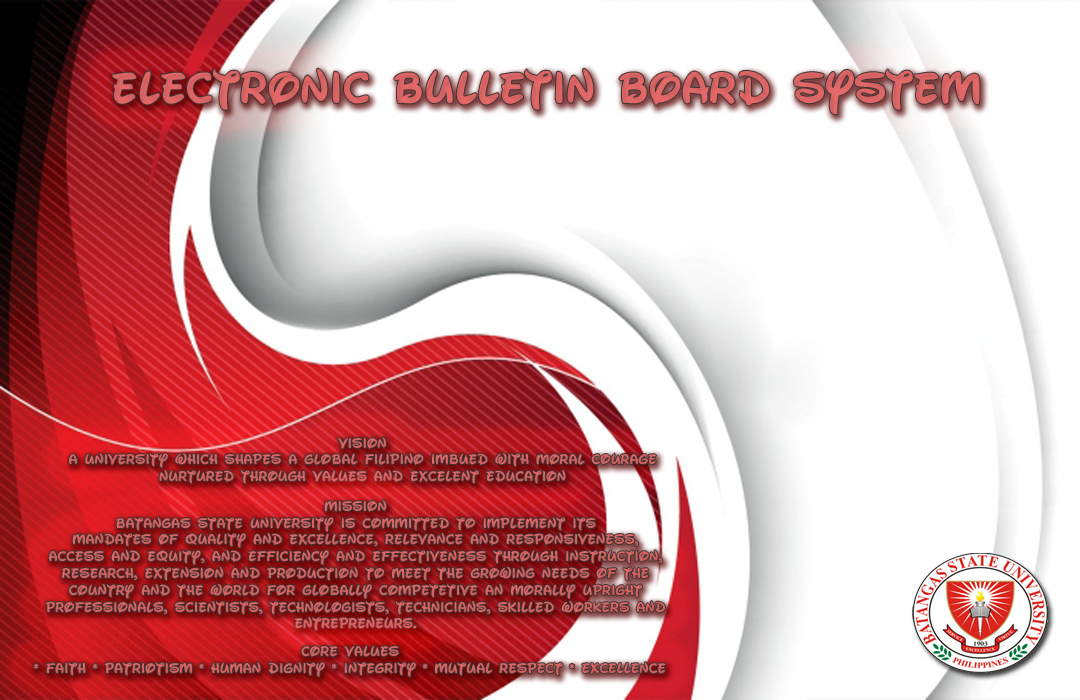
<style>
.page{position:relative;width:1080px;height:700px;background:#ffffff}
.page>*{position:absolute;margin:0}
.t1{font:14px "WaltographUI-Bold";color:#e86a6a}
</style>
<div class="page">
<p class="t1" style="left:45px;top:500px;width:620px;height:131px;text-align:center">Mission<br>batangas state university is committed to implement its<br>mandates of quality and excellence, relevance and responsiveness,<br>access and equity, and efficiency and effectiveness through instruction,<br>research, extension and production to meet the growing needs of the<br>country and the world for globally competetive an morally upright<br>professionals, scientists, technologists, technicians, skilled workers and<br>entrepreneurs.</p>
</div>
